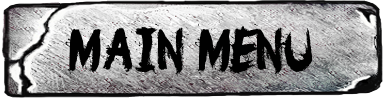
<style>
.page{position:relative;width:384px;height:98px}
.page>*{position:absolute;margin:0}
.t1{font:55px "OhNo";color:#010101}
</style>
<div class="page">
<p class="t1" style="left:63px;top:23px;width:253px;height:54px">MAIN MENU</p>
</div>
